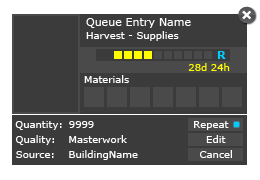
<style>
.page{position:relative;width:260px;height:180px;background:#3b3b3b}
.page>*{position:absolute;margin:0}
.t1{font:11px "Verdana";color:#ffffff}
.t2{font:10px "Verdana";color:#ffffff}
.t3{font:11px "Verdana-Bold";color:#00ccff}
.t4{font:10px "Verdana";color:#ffff00}
.t5{font:10px "Verdana";color:#fefefe}
</style>
<div class="page">
<p class="t1" style="left:86px;top:18px;width:105px;height:10px">Queue Entry Name</p>
<p class="t2" style="left:86px;top:31px;width:93px;height:10px">Harvest - Supplies</p>
<p class="t3" style="left:217px;top:51px;width:9px;height:8px">R</p>
<p class="t4" style="left:188px;top:63px;width:42px;height:8px">28d 24h</p>
<p class="t2" style="left:84px;top:75px;width:45px;height:8px">Materials</p>
<p class="t5" style="left:15px;top:121px;width:47px;height:9px">Quantity:</p>
<p class="t2" style="left:69px;top:121px;width:25px;height:7px">9999</p>
<p class="t2" style="left:194px;top:121px;width:35px;height:9px">Repeat</p>
<p class="t5" style="left:16px;top:135px;width:38px;height:10px">Quality:</p>
<p class="t2" style="left:69px;top:135px;width:58px;height:8px">Masterwork</p>
<p class="t2" style="left:206px;top:135px;width:20px;height:8px">Edit</p>
<p class="t2" style="left:69px;top:150px;width:69px;height:10px">BuildingName</p>
<p class="t2" style="left:200px;top:150px;width:32px;height:8px">Cancel</p>
<p class="t5" style="left:16px;top:151px;width:38px;height:7px">Source:</p>
</div>
